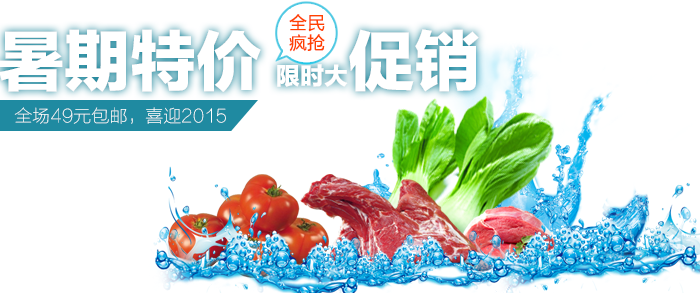
<style>
.page{position:relative;width:700px;height:293px;background:#ffffff}
.page>*{position:absolute;margin:0}
.t1{font:18px/20px "FZLTHJW--GB1-0";color:#ff4200}
.t2{font:66px "FZLTTHJW--GB1-0";color:#ffffff}
.t3{font:24px "FZLTTHJW--GB1-0";color:#ffffff}
.t4{font:18px "FZLTCXHJW--GB1-0";color:#ffffff}
</style>
<div class="page">
<p class="t1" style="left:289px;top:14px;width:36px;height:38px">全民<br>疯抢</p>
<p class="t2" style="left:0px;top:29px;width:479px;height:64px">暑期特价 <span class="t3">限时大</span>促销</p>
<p class="t4" style="left:14px;top:107px;width:212px;height:17px">全场49元包邮，喜迎2015</p>
</div>
